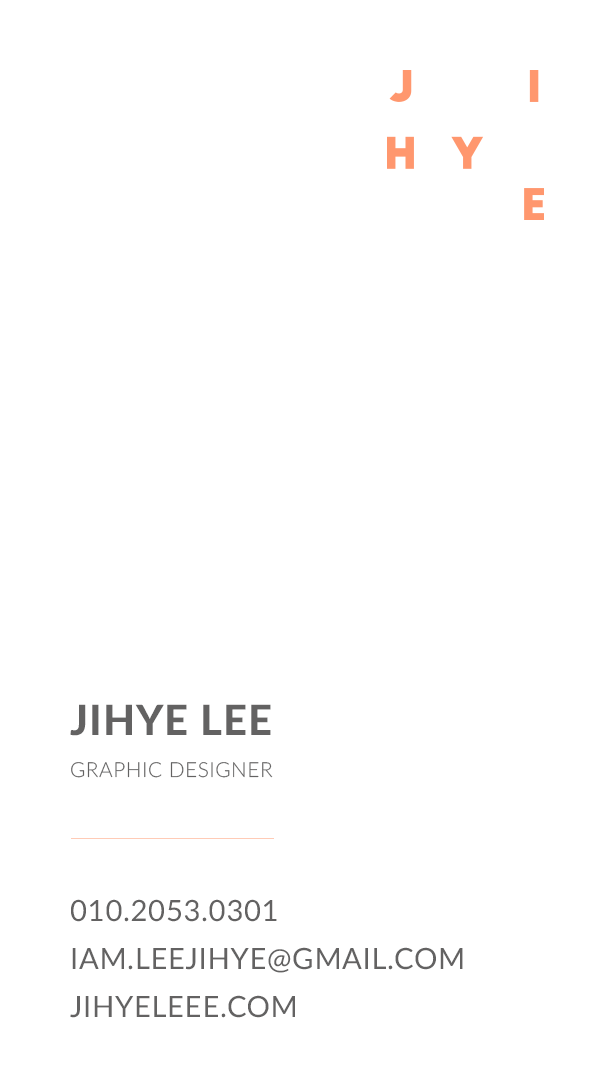
<style>
.page{position:relative;width:614px;height:1087px;background:#ffffff}
.page>*{position:absolute;margin:0}
.t1{font:29.2px/48px "Lato-Regular";letter-spacing:0.025em;color:#636262}
.t2{font:41.7px/41.7px "Lato-Heavy";letter-spacing:0.025em;color:#636262}
.t3{font:20.8px/41.7px "Lato-Light";letter-spacing:0.025em;color:#636262}
</style>
<div class="page">
<p class="t1" style="left:70px;top:704px;width:393px;height:314px"><span class="t2">JIHYE LEE<br></span><span class="t3">GRAPHIC DESIGNER<br><br><br></span>010.2053.0301<br>IAM.LEEJIHYE@GMAIL.COM<br>JIHYELEEE.COM</p>
</div>
